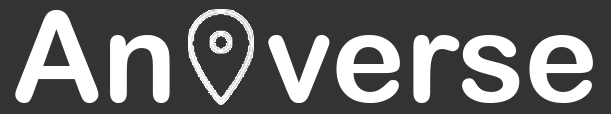
<style>
.page{position:relative;width:611px;height:114px;background:#333333}
.page>*{position:absolute;margin:0}
.t1{font:125px "ArialRoundedMTBold"}
.t2{font:125px "ArialRoundedMTBold";color:#ffffff}
</style>
<div class="page">
<p class="t1" style="left:15px;top:10px;width:525px;height:93px">Aniverse</p>
<p class="t2" style="left:68px;top:10px;width:525px;height:93px">Aniverse</p>
</div>
